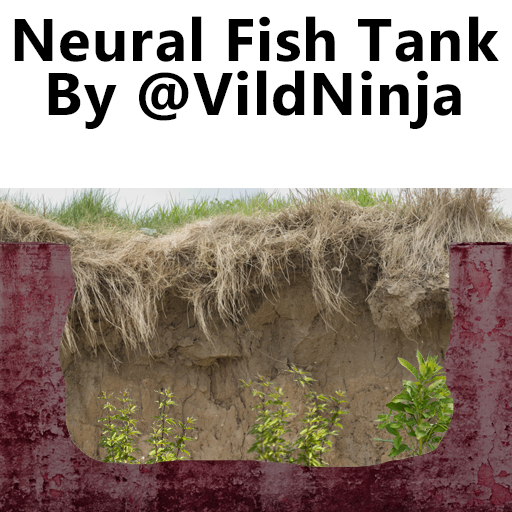
<style>
.page{position:relative;width:512px;height:512px;background:#ffffff}
.page>*{position:absolute;margin:0}
.t1{font:60px/54px "MicrosoftPhagsPa-Bold";letter-spacing:0.02em;color:#000000}
</style>
<div class="page">
<p class="t1" style="left:14px;top:16px;width:485px;height:113px;text-align:center">Neural Fish Tank<br>By @VildNinja</p>
</div>
